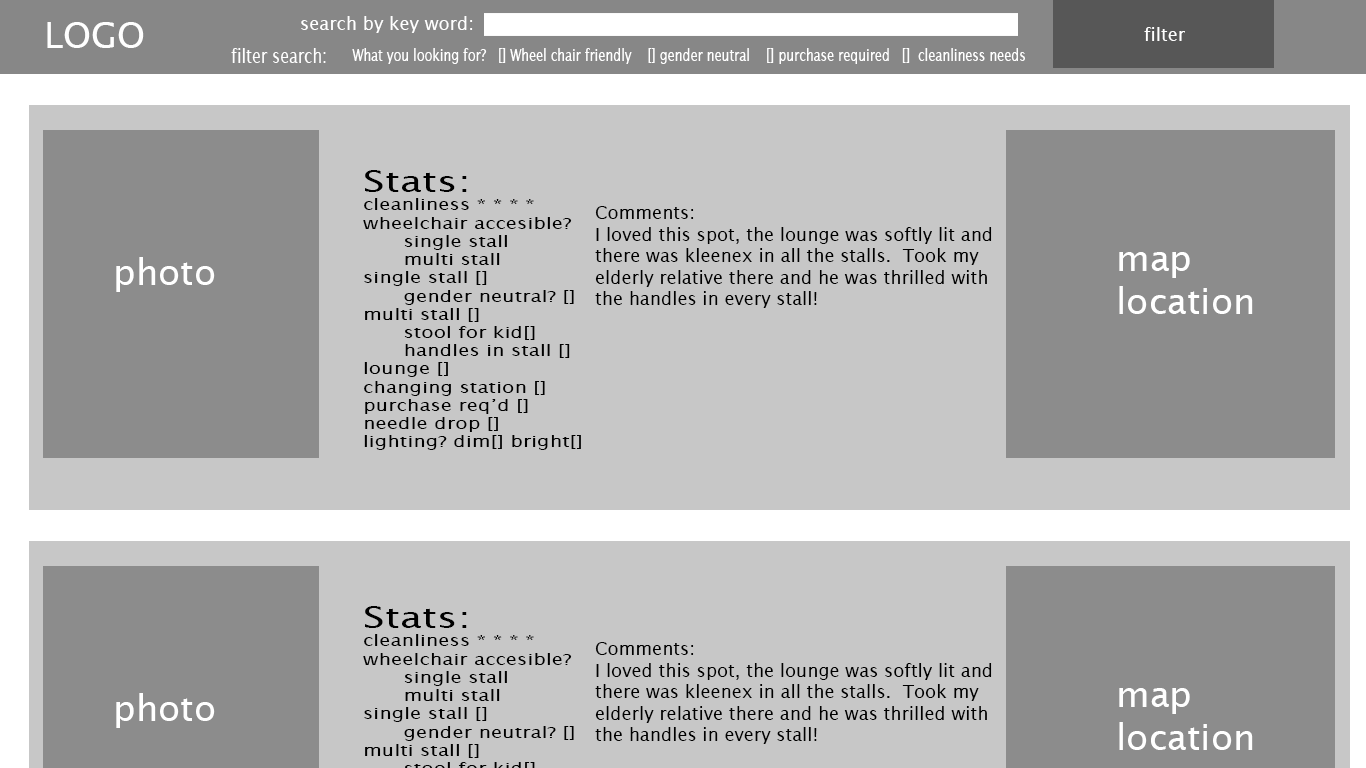
<style>
.page{position:relative;width:1366px;height:768px;background:#c7c7c7}
.page>*{position:absolute;margin:0}
.t1{font:18px "LucidaSans";color:#ffffff}
.t2{font:36px "LucidaSans";color:#ffffff}
.t3{font:19.3px "LucidaSans";color:#ffffff;scale:0.82 1}
.t4{font:15.8px "LucidaSans";color:#ffffff;scale:0.8 1}
.t5{font:15.2px "LucidaSans";color:#000000;scale:1.33 1}
.t6{font:30.4px "LucidaSans";color:#000000;scale:1.33 1}
.t7{font:18px "LucidaSans";color:#000000}
</style>
<div class="page">
<p class="t1" style="left:301px;top:16px;width:172px;height:17px">search by key word:</p>
<p class="t2" style="left:47px;top:22px;width:97px;height:26px">LOGO</p>
<p class="t1" style="left:1144px;top:27px;width:41px;height:14px">filter</p>
<p class="t3" style="left:231px;top:48px;width:95px;height:15px">filter search:</p>
<p class="t4" style="left:352px;top:48px;width:673px;height:16px">What you looking for?   [] Wheel chair friendly    [] gender neutral    [] purchase required   []  cleanliness needs</p>
<p class="t5" style="left:363px;top:170px;width:218px;height:280px"><span class="t6">Stats:<br></span>cleanliness * * * * <br>wheelchair accesible?<br> single stall <br> multi stall<br>single stall []<br> gender neutral? []<br>multi stall []<br> stool for kid[]<br> handles in stall []<br>lounge []<br>changing station []<br>purchase req’d []<br>needle drop []<br>lighting? dim[] bright[]</p>
<p class="t7" style="left:595px;top:206px;width:397px;height:102px">Comments:<br>I loved this spot, the lounge was softly lit and <br>there was kleenex in all the stalls.  Took my<br>elderly relative there and he was thrilled with <br>the handles in every stall!</p>
<p class="t2" style="left:116px;top:257px;width:99px;height:35px">photo</p>
<p class="t2" style="left:1119px;top:252px;width:134px;height:62px">map <br>location</p>
<p class="t7" style="left:595px;top:642px;width:397px;height:102px">Comments:<br>I loved this spot, the lounge was softly lit and <br>there was kleenex in all the stalls.  Took my<br>elderly relative there and he was thrilled with <br>the handles in every stall!</p>
<p class="t2" style="left:1119px;top:688px;width:134px;height:62px">map <br>location</p>
<p class="t2" style="left:116px;top:693px;width:99px;height:35px">photo</p>
</div>
